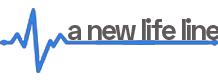
<style>
.page{position:relative;width:218px;height:80px;background:#ffffff}
.page>*{position:absolute;margin:0}
.t1{font:30px "SpaceGrotesk-Bold";letter-spacing:-0.06em;color:#5f5a5a;scale:0.95 1}
</style>
<div class="page">
<p class="t1" style="left:68px;top:18px;width:152px;height:22px">a new life line</p>
</div>
